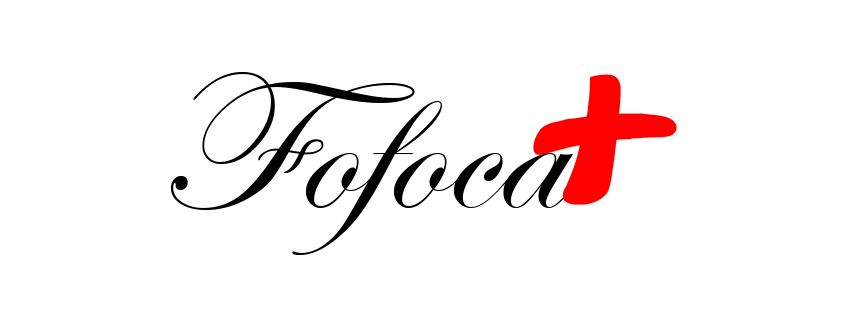
<style>
.page{position:relative;width:851px;height:315px;background:#ffffff}
.page>*{position:absolute;margin:0}
.t1{font:200.3px "EdwardianScriptITC";color:#000000;scale:1.03 1}
</style>
<div class="page">
<p class="t1" style="left:170px;top:71px;width:413px;height:184px">Fofoca</p>
</div>
